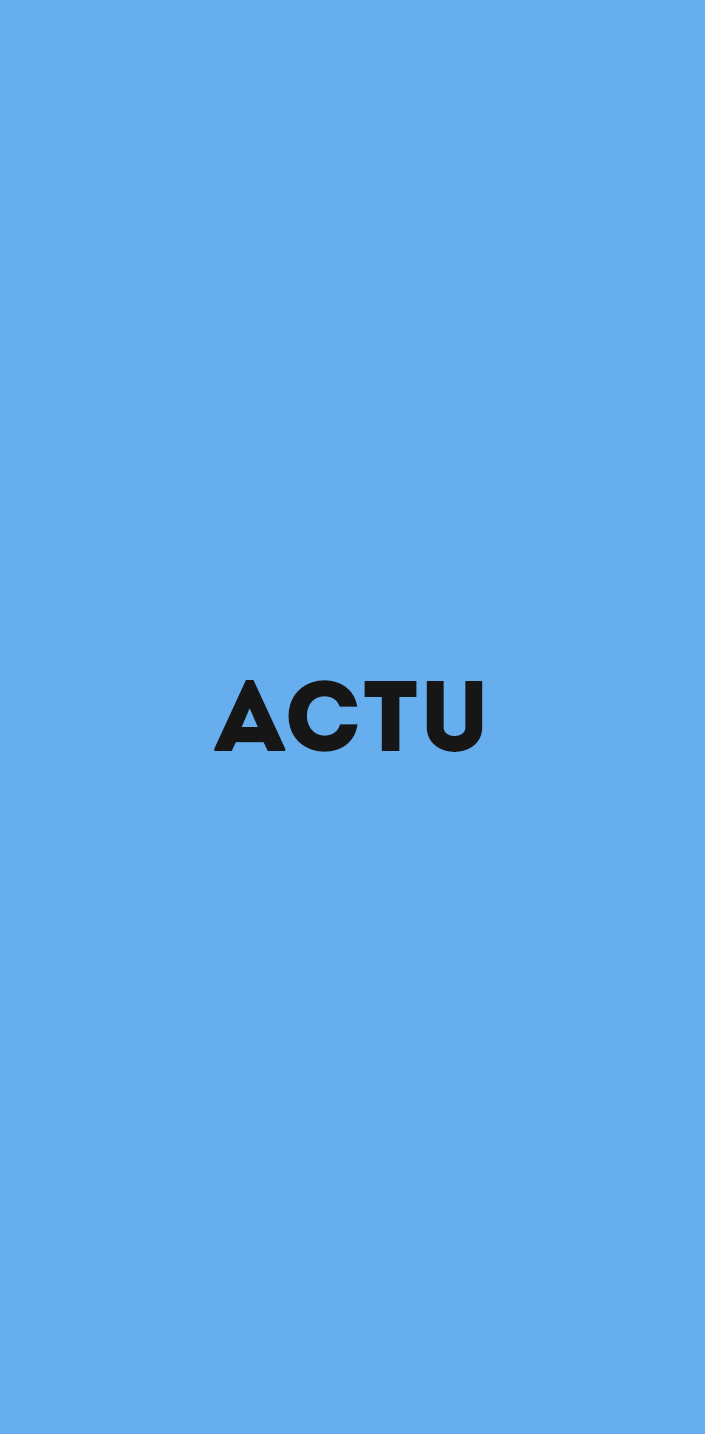
<style>
.page{position:relative;width:705px;height:1434px;background:#66aeed}
.page>*{position:absolute;margin:0}
.t1{font:100px "Intro";color:#161616;font-variant:small-caps}
</style>
<div class="page">
<p class="t1" style="left:214px;top:680px;width:269px;height:72px">ACTU</p>
</div>
